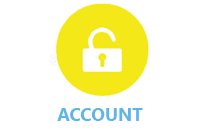
<style>
.page{position:relative;width:205px;height:138px;background:#ffffff}
.page>*{position:absolute;margin:0}
.t1{font:18px "NirmalaUI-Bold";color:#5eb5ea}
</style>
<div class="page">
<p class="t1" style="left:57px;top:108px;width:86px;height:13px">ACCOUNT</p>
</div>
